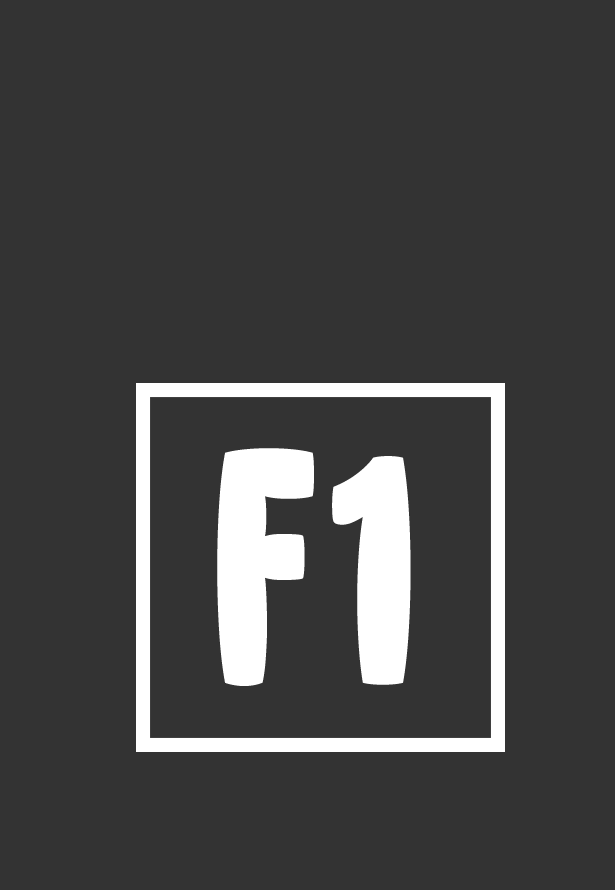
<style>
.page{position:relative;width:615px;height:890px;background:#333333}
.page>*{position:absolute;margin:0}
.t1{font:327.3px "a_AlternaSw";letter-spacing:-0.06em;color:#ffffff;font-variant:small-caps;scale:0.82 1}
</style>
<div class="page">
<p class="t1" style="left:217px;top:448px;width:194px;height:238px">F1</p>
</div>
